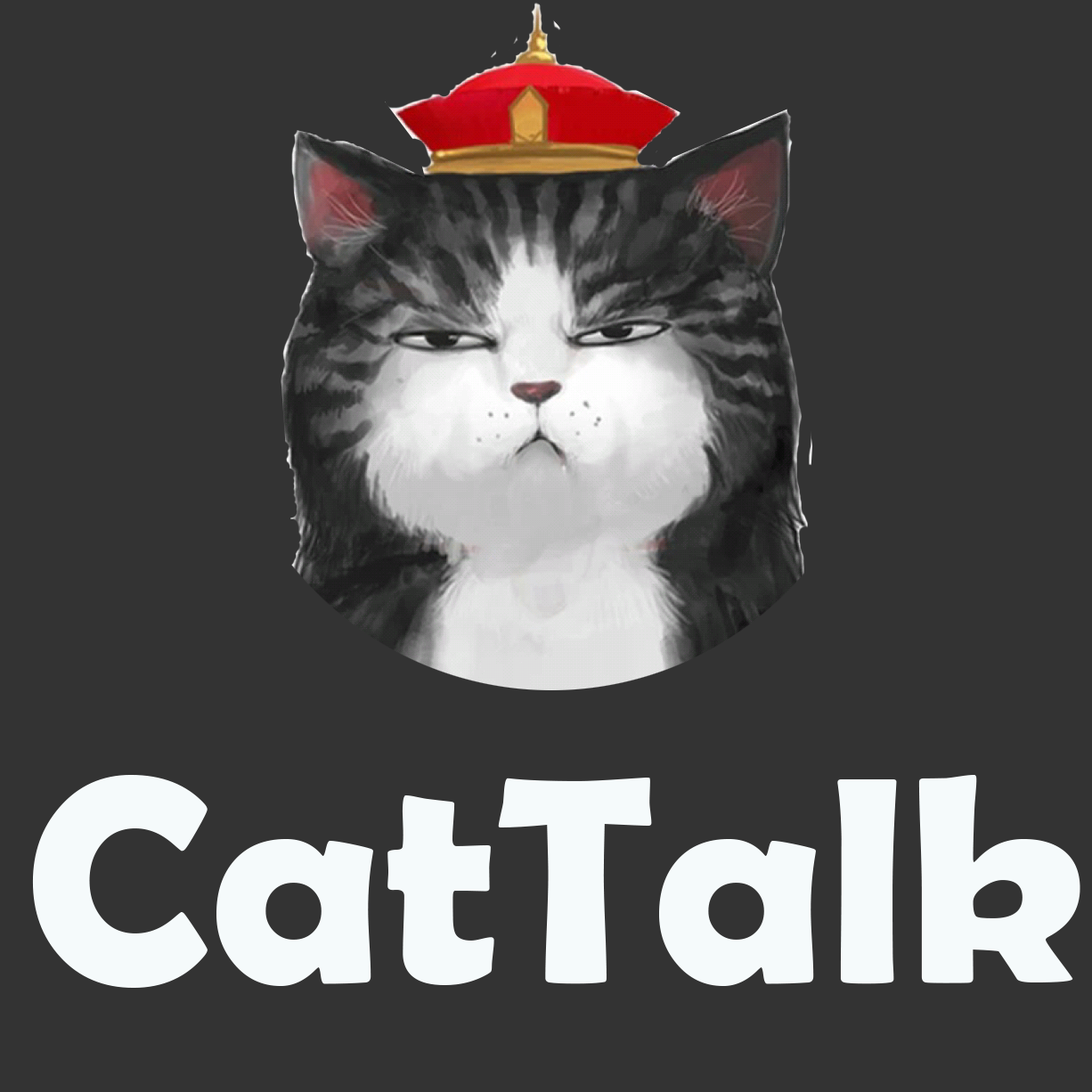
<style>
.page{position:relative;width:1092px;height:1092px;background:#333333}
.page>*{position:absolute;margin:0}
.t1{font:296.9px "BerlinSansFBDemi-Bold";color:#f5fafb}
</style>
<div class="page">
<p class="t1" style="left:32px;top:775px;width:1048px;height:213px">CatTalk</p>
</div>
